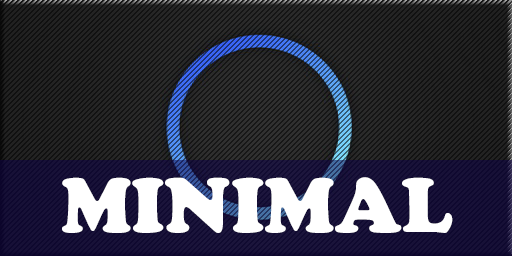
<style>
.page{position:relative;width:512px;height:256px}
.page>*{position:absolute;margin:0}
.t1{font:80px "CooperBlack";color:#ffffff}
</style>
<div class="page">
<p class="t1" style="left:62px;top:177px;width:391px;height:56px">MINIMAL</p>
</div>
